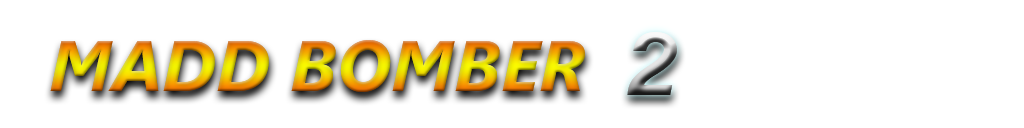
<style>
.page{position:relative;width:1024px;height:128px;background:#ffffff}
.page>*{position:absolute;margin:0}
.t1{font:72px "SegoeUI-BoldItalic"}
.t2{font:90px "Monospace821BT-BoldItalic"}
</style>
<div class="page">
<p class="t1" style="left:50px;top:40px;width:535px;height:52px">MADD BOMBER</p>
<p class="t2" style="left:627px;top:32px;width:50px;height:63px">2</p>
</div>
